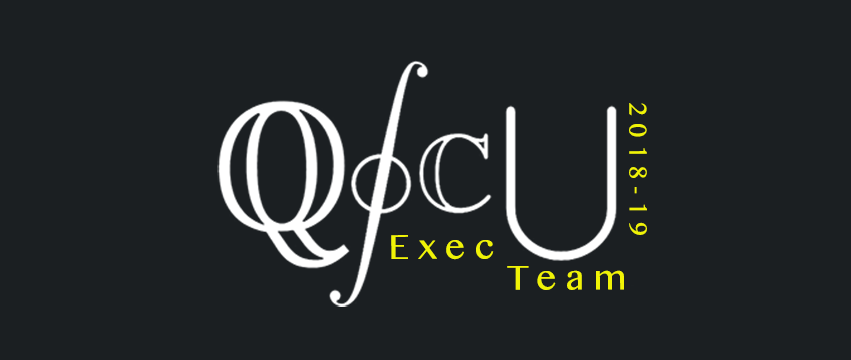
<style>
.page{position:relative;width:851px;height:360px;background:#1b1f22}
.page>*{position:absolute;margin:0}
.t1{font:24.6px "OriyaMN";letter-spacing:0.28em;color:#f0f306}
.t2{font:34.7px/31.2px "OriyaMN";letter-spacing:0.28em;color:#f0f306}
</style>
<div class="page">
<p class="t1" style="left:629px;top:103px;width:18px;height:132px;rotate:90deg">2018-19</p>
<p class="t2" style="left:391px;top:235px;width:233px;height:55px;text-align:center">Exec <br>          Team</p>
</div>
